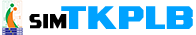
<style>
.page{position:relative;width:196px;height:35px;background:#ffffff}
.page>*{position:absolute;margin:0}
.t1{font:32.2px "TradesmithRegular";color:#00a2ff;scale:1.47 1}
.t2{font:19.7px "TradesmithRegular";color:#000000;scale:1.2 1}
</style>
<div class="page">
<p class="t1" style="left:61px;top:6px;width:132px;height:23px">TKPLB</p>
<p class="t2" style="left:29px;top:14px;width:38px;height:15px">sim</p>
</div>
